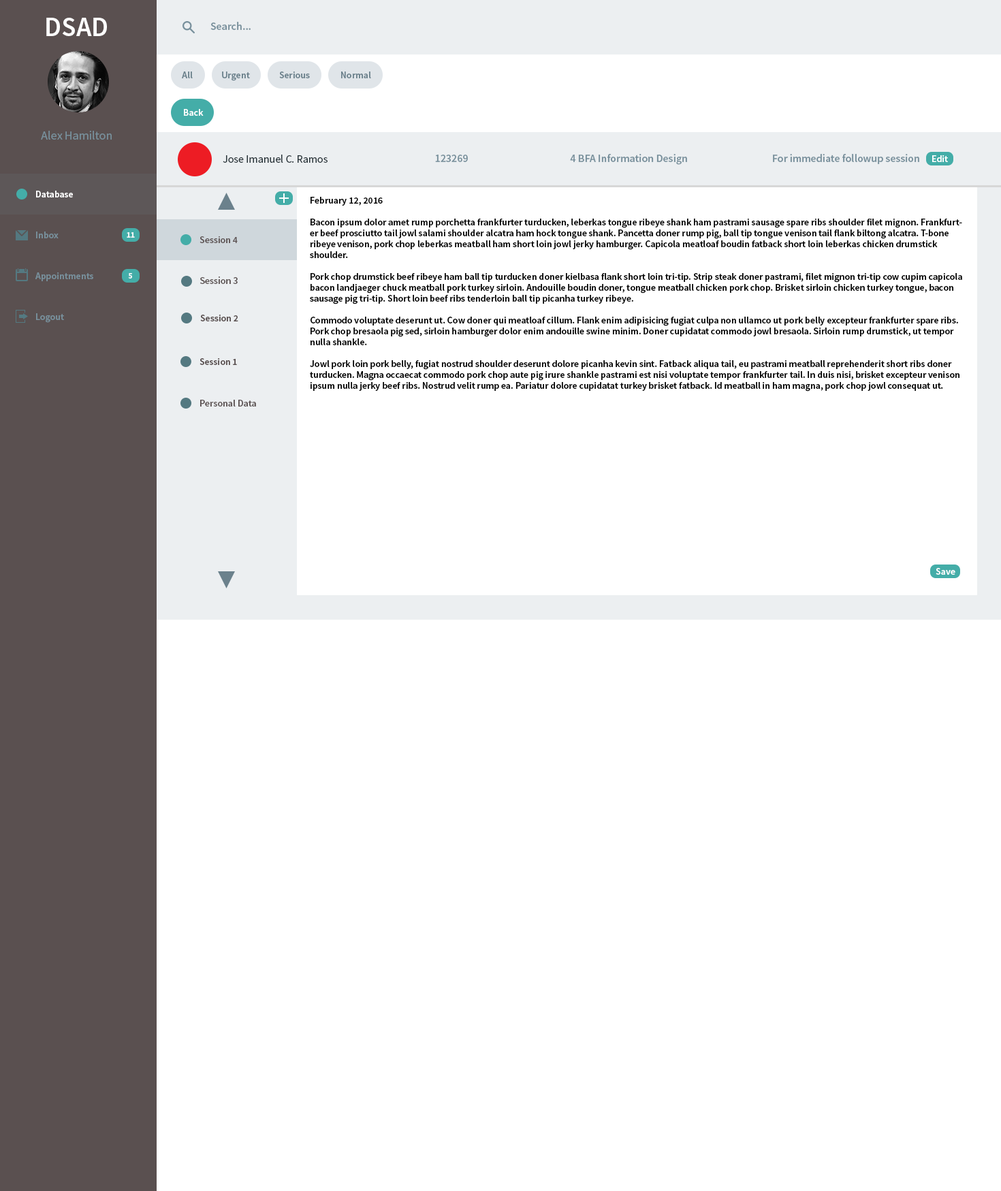
<style>
.page{position:relative;width:1001px;height:1191px;background:#ffffff}
.page>*{position:absolute;margin:0}
.t1{font:27.2px "SourceSansPro-Semibold";color:#ffffff}
.t2{font:10.9px "SourceSansPro-Semibold";color:#78909c}
.t3{font:9.5px "SourceSansPro-Semibold";color:#6b818c}
.t4{font:9.5px "SourceSansPro-Semibold";color:#ffffff}
.t5{font:12.3px "SourceSansPro-Regular";color:#78909c}
.t6{font:10.9px "SourceSansPro-Regular";color:#263238}
.t7{font:11px "SourceSansPro-Semibold";color:#78909c}
.t8{font:9.5px/10.9px "SourceSansPro-Semibold";color:#000000}
.t9{font:9.5px "SourceSansPro-Semibold";color:#78909c}
.t10{font:8.2px "SourceSansPro-Bold";color:#f8fafb}
.t11{font:9.5px "SourceSansPro-Semibold";color:#5a5050}
.t12{font:9.8px "SourceSansPro-Semibold";color:#5a5050}
</style>
<div class="page">
<p class="t1" style="left:46px;top:18px;width:61px;height:18px">DSAD</p>
<p class="t2" style="left:210px;top:22px;width:41px;height:8px">Search...</p>
<p class="t3" style="left:182px;top:72px;width:11px;height:6px">All</p>
<p class="t3" style="left:222px;top:72px;width:28px;height:9px">Urgent</p>
<p class="t3" style="left:279px;top:72px;width:31px;height:6px">Serious</p>
<p class="t3" style="left:341px;top:72px;width:30px;height:6px">Normal</p>
<p class="t4" style="left:184px;top:109px;width:20px;height:7px">Back</p>
<p class="t5" style="left:41px;top:131px;width:71px;height:9px">Alex Hamilton</p>
<p class="t6" style="left:223px;top:155px;width:105px;height:8px">Jose Imanuel C. Ramos</p>
<p class="t2" style="left:435px;top:155px;width:33px;height:7px">123269</p>
<p class="t2" style="left:570px;top:154px;width:117px;height:11px">4 BFA Information Design</p>
<p class="t7" style="left:773px;top:154px;width:146px;height:10px">For immediate followup session</p>
<p class="t4" style="left:932px;top:155px;width:16px;height:7px">Edit</p>
<p class="t4" style="left:36px;top:191px;width:37px;height:6px">Database</p>
<p class="t8" style="left:310px;top:197px;width:652px;height:195px">February 12, 2016<br><br>Bacon ipsum dolor amet rump porchetta frankfurter turducken, leberkas tongue ribeye shank ham pastrami sausage spare ribs shoulder filet mignon. Frankfurter beef prosciutto tail jowl salami shoulder alcatra ham hock tongue shank. Pancetta doner rump pig, ball tip tongue venison tail flank biltong alcatra. T-bone ribeye venison, pork chop leberkas meatball ham short loin jowl jerky hamburger. Capicola meatloaf boudin fatback short loin leberkas chicken drumstick shoulder.<br><br>Pork chop drumstick beef ribeye ham ball tip turducken doner kielbasa flank short loin tri-tip. Strip steak doner pastrami, filet mignon tri-tip cow cupim capicola bacon landjaeger chuck meatball pork turkey sirloin. Andouille boudin doner, tongue meatball chicken pork chop. Brisket sirloin chicken turkey tongue, bacon sausage pig tri-tip. Short loin beef ribs tenderloin ball tip picanha turkey ribeye.<br><br>Commodo voluptate deserunt ut. Cow doner qui meatloaf cillum. Flank enim adipisicing fugiat culpa non ullamco ut pork belly excepteur frankfurter spare ribs. Pork chop bresaola pig sed, sirloin hamburger dolor enim andouille swine minim. Doner cupidatat commodo jowl bresaola. Sirloin rump drumstick, ut tempor nulla shankle.<br><br>Jowl pork loin pork belly, fugiat nostrud shoulder deserunt dolore picanha kevin sint. Fatback aliqua tail, eu pastrami meatball reprehenderit short ribs doner turducken. Magna occaecat commodo pork chop aute pig irure shankle pastrami est nisi voluptate tempor frankfurter tail. In duis nisi, brisket excepteur venison ipsum nulla jerky beef ribs. Nostrud velit rump ea. Pariatur dolore cupidatat turkey brisket fatback. Id meatball in ham magna, pork chop jowl consequat ut.</p>
<p class="t9" style="left:36px;top:232px;width:23px;height:6px">Inbox</p>
<p class="t10" style="left:127px;top:232px;width:8px;height:6px">11</p>
<p class="t11" style="left:200px;top:236px;width:38px;height:7px">Session 4</p>
<p class="t9" style="left:35px;top:272px;width:58px;height:9px">Appointments</p>
<p class="t10" style="left:128px;top:273px;width:4px;height:6px">5</p>
<p class="t12" style="left:200px;top:276px;width:38px;height:8px">Session 3</p>
<p class="t9" style="left:36px;top:313px;width:28px;height:10px">Logout</p>
<p class="t11" style="left:200px;top:315px;width:38px;height:6px">Session 2</p>
<p class="t11" style="left:200px;top:358px;width:37px;height:7px">Session 1</p>
<p class="t11" style="left:200px;top:400px;width:56px;height:7px">Personal Data</p>
<p class="t4" style="left:936px;top:568px;width:19px;height:7px">Save</p>
</div>
